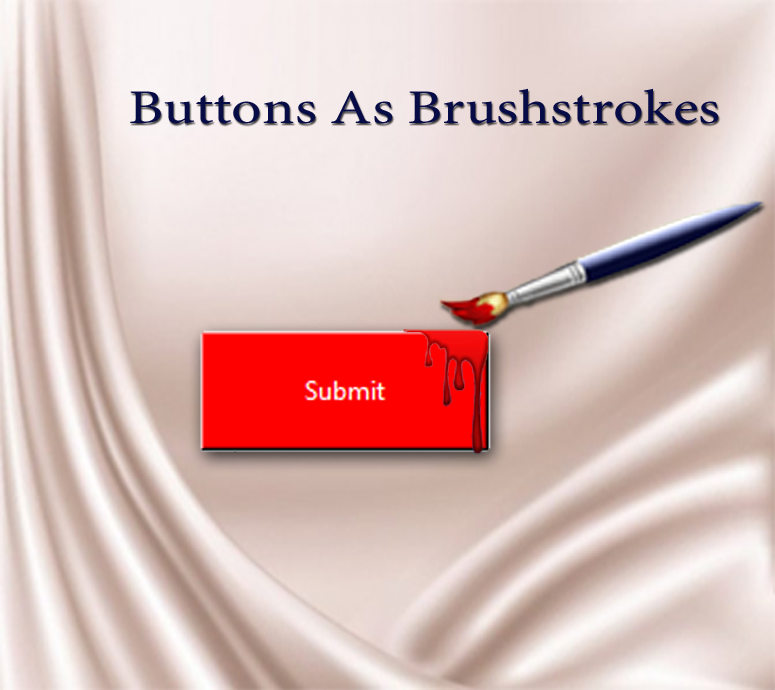
<style>
.page{position:relative;width:775px;height:690px}
.page>*{position:absolute;margin:0}
.t1{font:48.3px "MinionPro-Regular";color:#070b46;scale:1.24 1}
</style>
<div class="page">
<p class="t1" style="left:130px;top:88px;width:589px;height:36px">Buttons As Brushstrokes</p>
</div>
